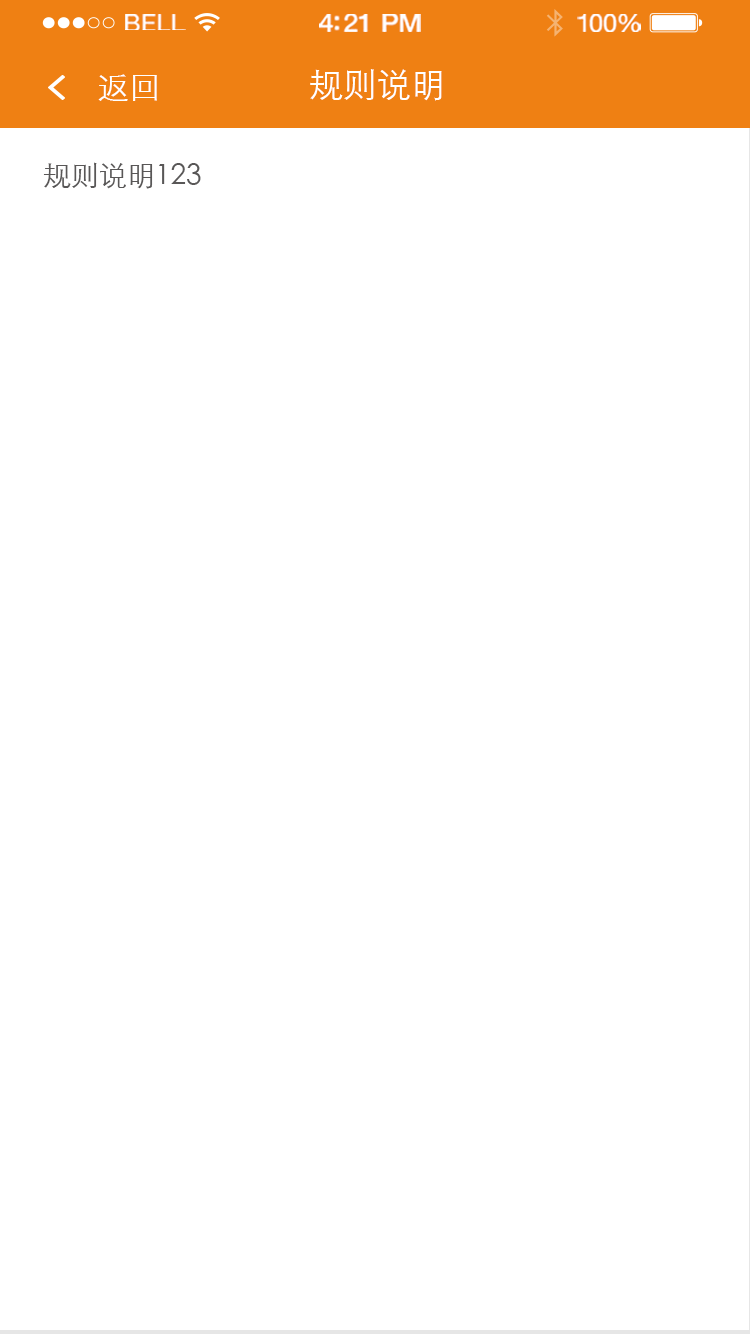
<style>
.page{position:relative;width:750px;height:1334px;background:#ffffff}
.page>*{position:absolute;margin:0}
.t1{font:23.3px "HelveticaNeue";letter-spacing:0.02em;color:#ffffff;scale:1.06 1}
.t2{font:25.3px "HelveticaNeue-Medium";letter-spacing:-0.02em;color:#ffffff;scale:1.06 1}
.t3{font:24.3px "HelveticaNeue";letter-spacing:-0.02em;color:#ffffff;scale:1.06 1}
.t4{font:32px "STXihei";color:#ffffff}
.t5{font:34px "STXihei";color:#ffffff}
.t6{font:28px "STXihei";color:#595757}
</style>
<div class="page">
<p class="t1" style="left:125px;top:14px;width:61px;height:16px">BELL</p>
<p class="t2" style="left:319px;top:14px;width:102px;height:18px">4:21 PM</p>
<p class="t3" style="left:577px;top:14px;width:64px;height:18px">100%</p>
<p class="t4" style="left:98px;top:74px;width:59px;height:27px">返回</p>
<p class="t5" style="left:310px;top:69px;width:132px;height:32px">规则说明</p>
<p class="t6" style="left:43px;top:162px;width:158px;height:27px">规则说明123</p>
</div>
